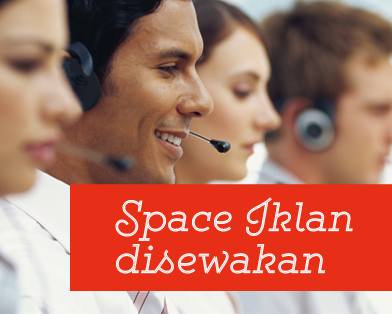
<style>
.page{position:relative;width:392px;height:314px;background:#e72f17}
.page>*{position:absolute;margin:0}
.t1{font:35.5px "GistLight";letter-spacing:0.025em;color:#fffdfd}
.t2{font:36px "GistLight";letter-spacing:0.025em;color:#fdfafa}
</style>
<div class="page">
<p class="t1" style="left:115px;top:197px;width:238px;height:44px">Space Iklan</p>
<p class="t2" style="left:116px;top:244px;width:210px;height:30px">disewakan</p>
</div>
